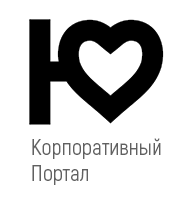
<style>
.page{position:relative;width:193px;height:198px;background:#ffffff}
.page>*{position:absolute;margin:0}
.t1{font:22.2px "Akrobat-Regular";color:#616161}
</style>
<div class="page">
<p class="t1" style="left:32px;top:138px;width:129px;height:47px">Корпоративный<br>Портал</p>
</div>
